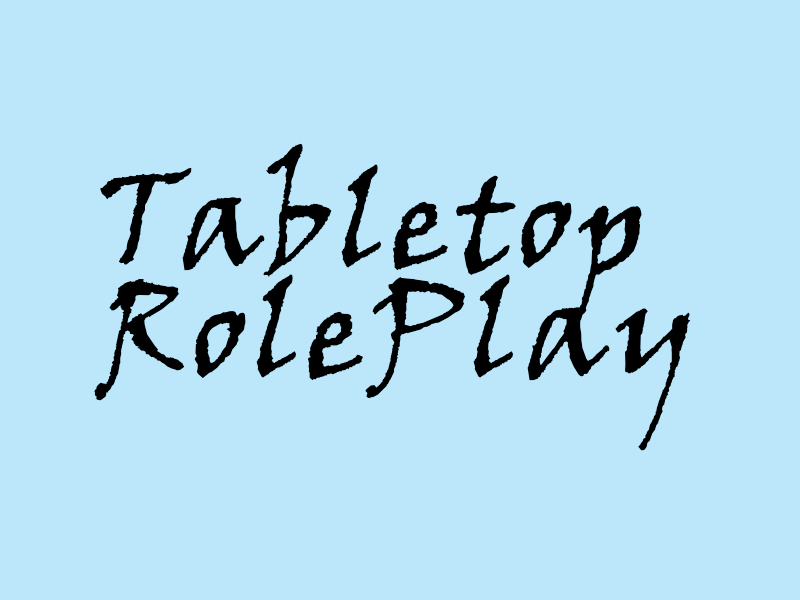
<style>
.page{position:relative;width:800px;height:600px;background:#bce6f9}
.page>*{position:absolute;margin:0}
.t1{font:132.6px/18.8px "VinerHandITC";letter-spacing:0.03em;color:#000000}
</style>
<div class="page">
<p class="t1" style="left:94px;top:143px;width:597px;height:308px">Tabletop <br><br><br><br><br>RolePlay</p>
</div>
